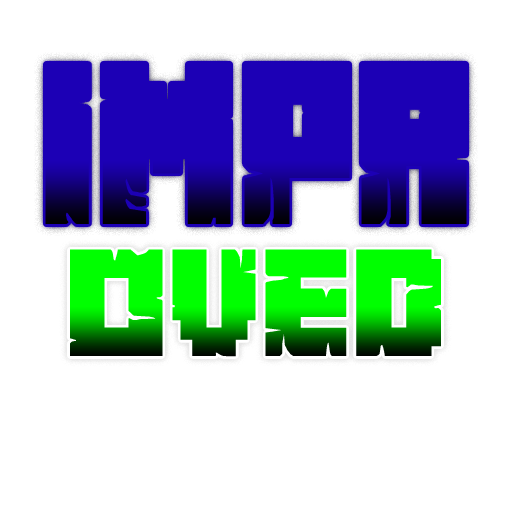
<style>
.page{position:relative;width:512px;height:512px;background:#ffffff}
.page>*{position:absolute;margin:0}
.t1{font:204.2px "MinecrafterAlt";color:#1c00b5;scale:0.86 1}
.t2{font:136px "MinecrafterAlt"}
</style>
<div class="page">
<p class="t1" style="left:45px;top:63px;width:422px;height:161px">IMPR</p>
<p class="t2" style="left:70px;top:249px;width:372px;height:108px">oved</p>
</div>
